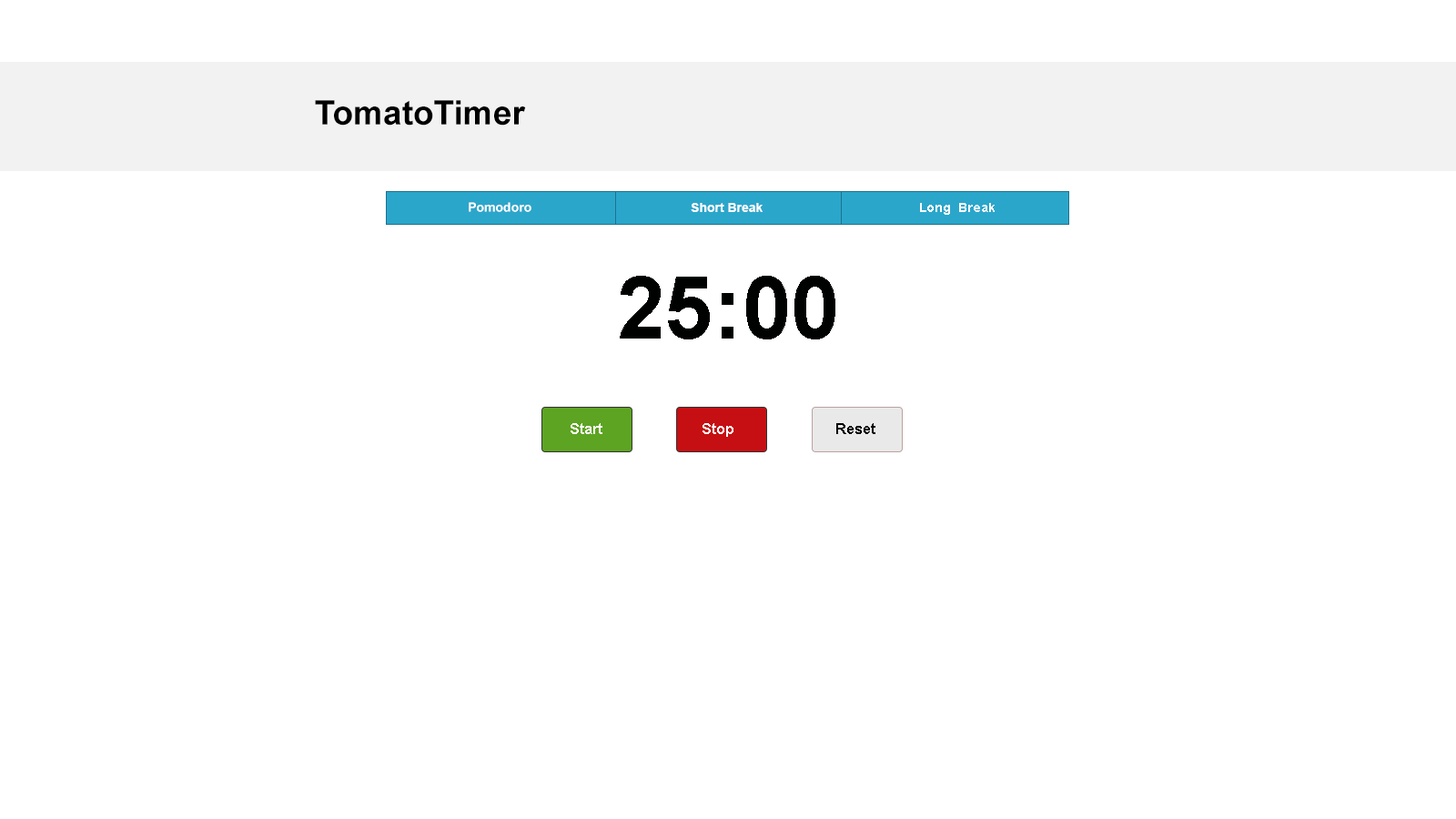
<style>
.page{position:relative;width:1456px;height:819px;background:#ffffff}
.page>*{position:absolute;margin:0}
.t1{font:33.7px "Arial-BoldMT";color:#000000}
.t2{font:12.7px "Arial-BoldMT";color:#ffffff}
.t3{font:12.7px "Arial-BoldMT";color:#fdfdfd}
.t4{font:87.4px "Arial-BoldMT";color:#000101}
.t5{font:14.6px "Arial-BoldMT";color:#ffffff}
.t6{font:14.6px "Arial-BoldMT";color:#000000}
</style>
<div class="page">
<p class="t1" style="left:315px;top:100px;width:211px;height:26px">TomatoTimer</p>
<p class="t2" style="left:469px;top:202px;width:62px;height:10px">Pomodoro</p>
<p class="t2" style="left:691px;top:203px;width:72px;height:9px">Short Break</p>
<p class="t3" style="left:920px;top:203px;width:75px;height:12px">Long  Break</p>
<p class="t4" style="left:620px;top:276px;width:215px;height:63px">25:00</p>
<p class="t5" style="left:571px;top:423px;width:31px;height:11px">Start</p>
<p class="t5" style="left:703px;top:423px;width:30px;height:14px">Stop</p>
<p class="t6" style="left:836px;top:423px;width:39px;height:11px">Reset</p>
</div>
